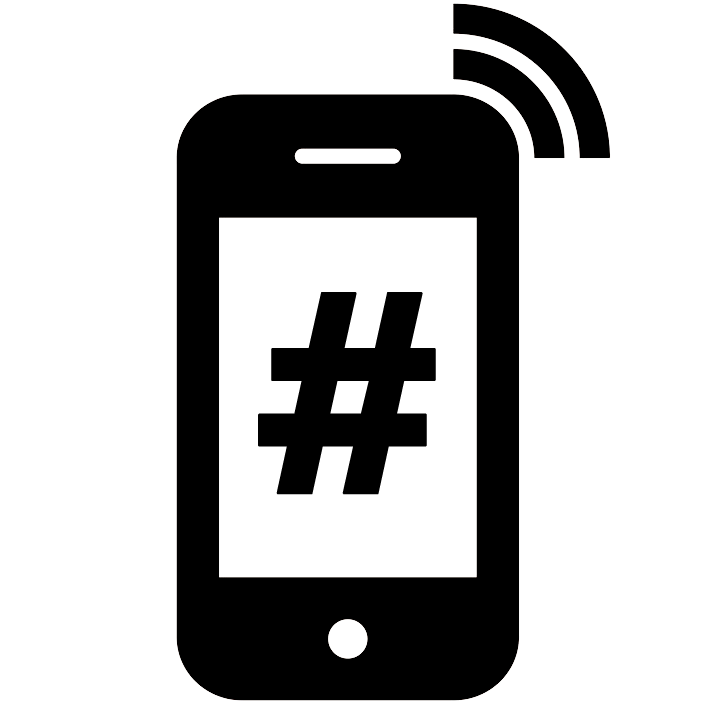
<style>
.page{position:relative;width:705px;height:705px;background:#ffffff}
.page>*{position:absolute;margin:0}
.t1{font:250px "Futura-ExtraBold";color:#000000;font-weight:bold;scale:0.95 1}
</style>
<div class="page">
<p class="t1" style="left:258px;top:292px;width:178px;height:203px">#</p>
</div>
